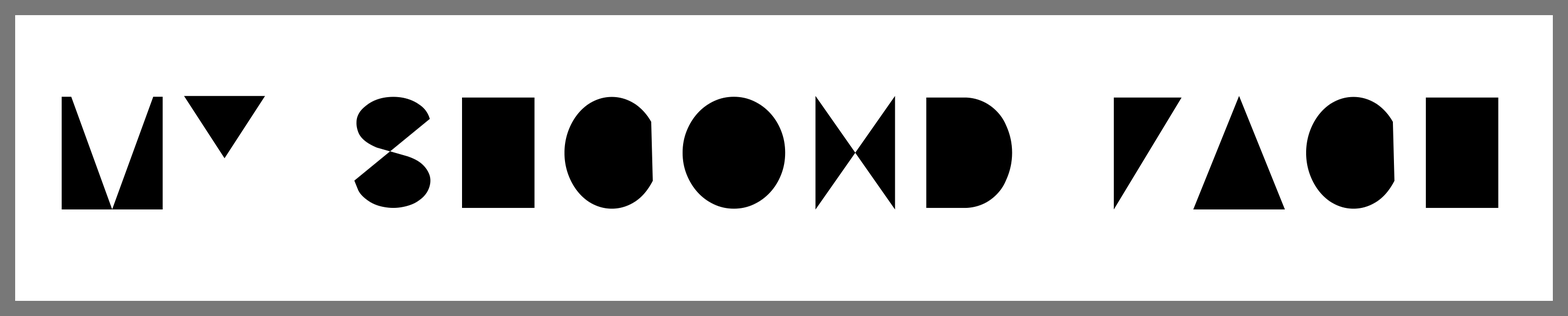
<style>
.page{position:relative;width:1568px;height:316px;background:#ffffff}
.page>*{position:absolute;margin:0}
.t1{font:156.8px "OLFSimpleSansOC-Regular";color:#000000}
</style>
<div class="page">
<p class="t1" style="left:62px;top:96px;width:1436px;height:114px">MY SECOND FACE</p>
</div>
